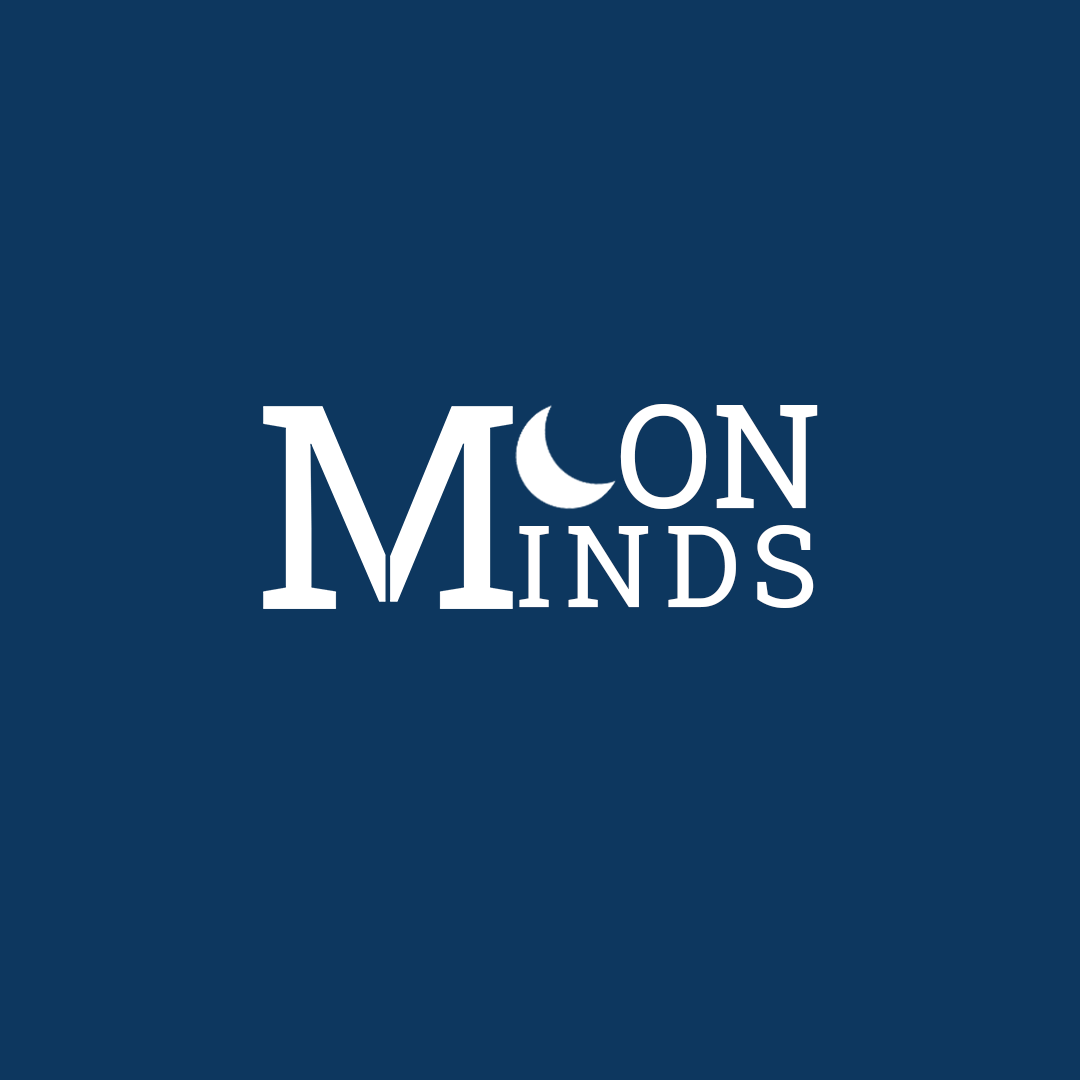
<style>
.page{position:relative;width:1080px;height:1080px;background:#0d375f}
.page>*{position:absolute;margin:0}
.t1{font:143.7px "RobotoSlab-Regular";color:#ffffff}
.t2{font:114px "RobotoSlab-Regular";letter-spacing:0.1em;color:#ffffff}
</style>
<div class="page">
<p class="t1" style="left:620px;top:404px;width:198px;height:105px">ON</p>
<p class="t2" style="left:519px;top:525px;width:295px;height:83px">INDS</p>
</div>
